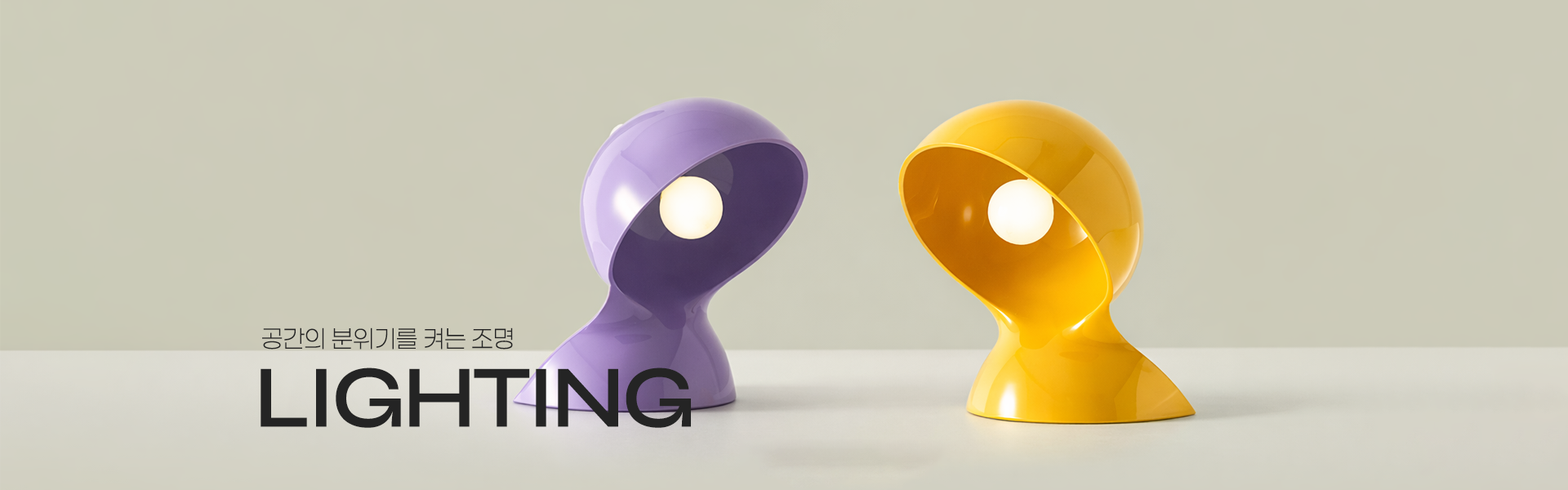
<style>
.page{position:relative;width:1568px;height:490px;background:#cccbb9}
.page>*{position:absolute;margin:0}
.t1{font:24.5px "Paperlogy-2ExtraLight";color:#242424}
.t2{font:88.7px "Syne-SemiBold";letter-spacing:-0.04em;color:#242424}
</style>
<div class="page">
<p class="t1" style="left:262px;top:327px;width:251px;height:23px">공간의 분위기를 켜는 조명</p>
<p class="t2" style="left:261px;top:368px;width:430px;height:60px">LIGHTING</p>
</div>
